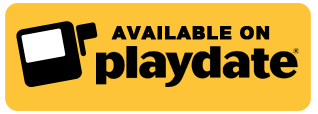
<style>
.page{position:relative;width:318px;height:114px;background:#fec438}
.page>*{position:absolute;margin:0}
.t1{font:18.4px "Arial-Black";color:#000000;font-weight:bold}
</style>
<div class="page">
<p class="t1" style="left:111px;top:26px;width:159px;height:14px">AVAILABLE ON</p>
</div>
